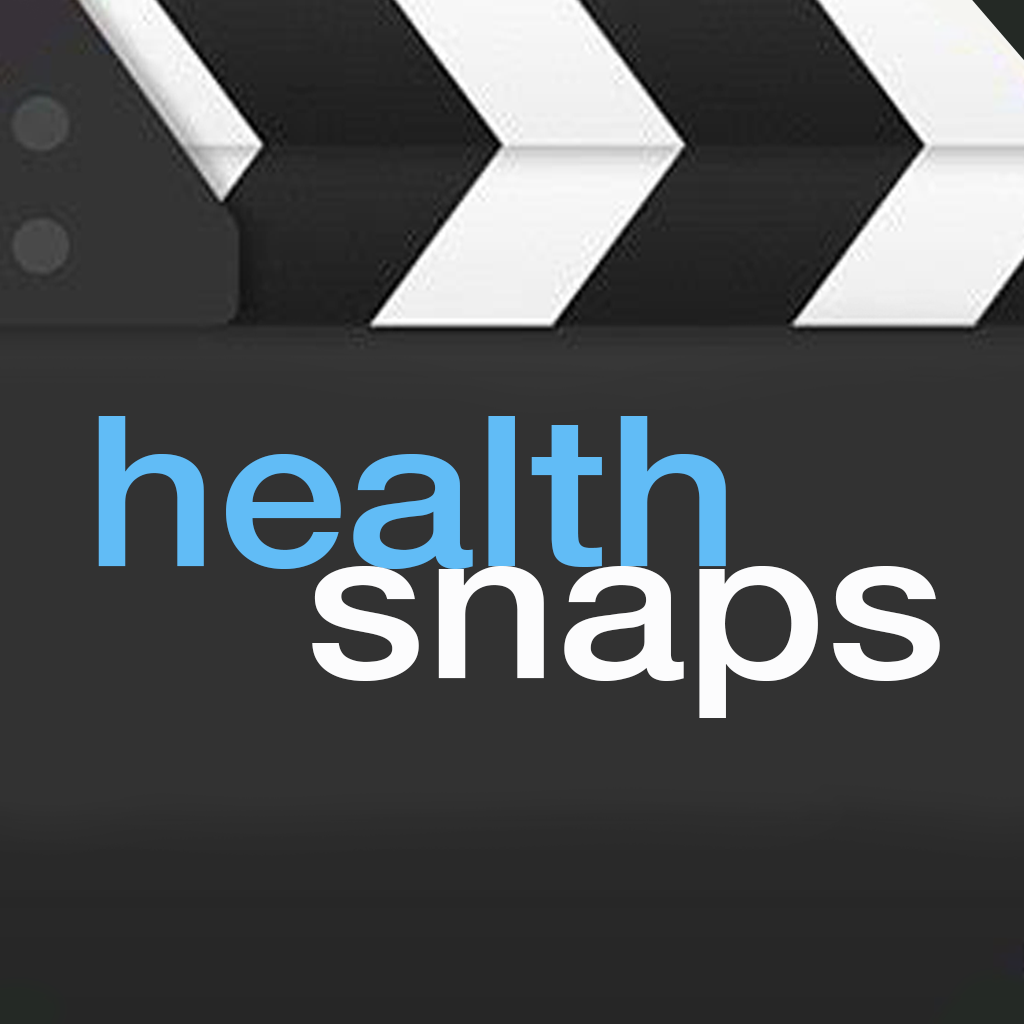
<style>
.page{position:relative;width:1024px;height:1024px;background:#323232}
.page>*{position:absolute;margin:0}
.t1{font:210.2px "HelveticaNeue-Medium";color:#61bcf6;scale:1.1 1}
.t2{font:210.2px "HelveticaNeue-Medium";color:#fcfcfd;scale:1.1 1}
</style>
<div class="page">
<p class="t1" style="left:98px;top:416px;width:628px;height:153px">health</p>
<p class="t2" style="left:312px;top:566px;width:628px;height:152px">snaps</p>
</div>
